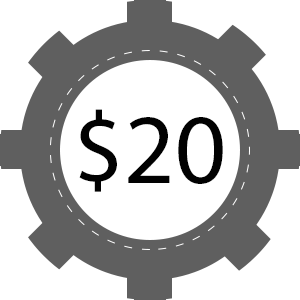
<style>
.page{position:relative;width:300px;height:300px;background:#ffffff}
.page>*{position:absolute;margin:0}
.t1{font:100px "MyriadPro-Regular";color:#010101}
</style>
<div class="page">
<p class="t1" style="left:79px;top:109px;width:144px;height:83px">$20</p>
</div>
